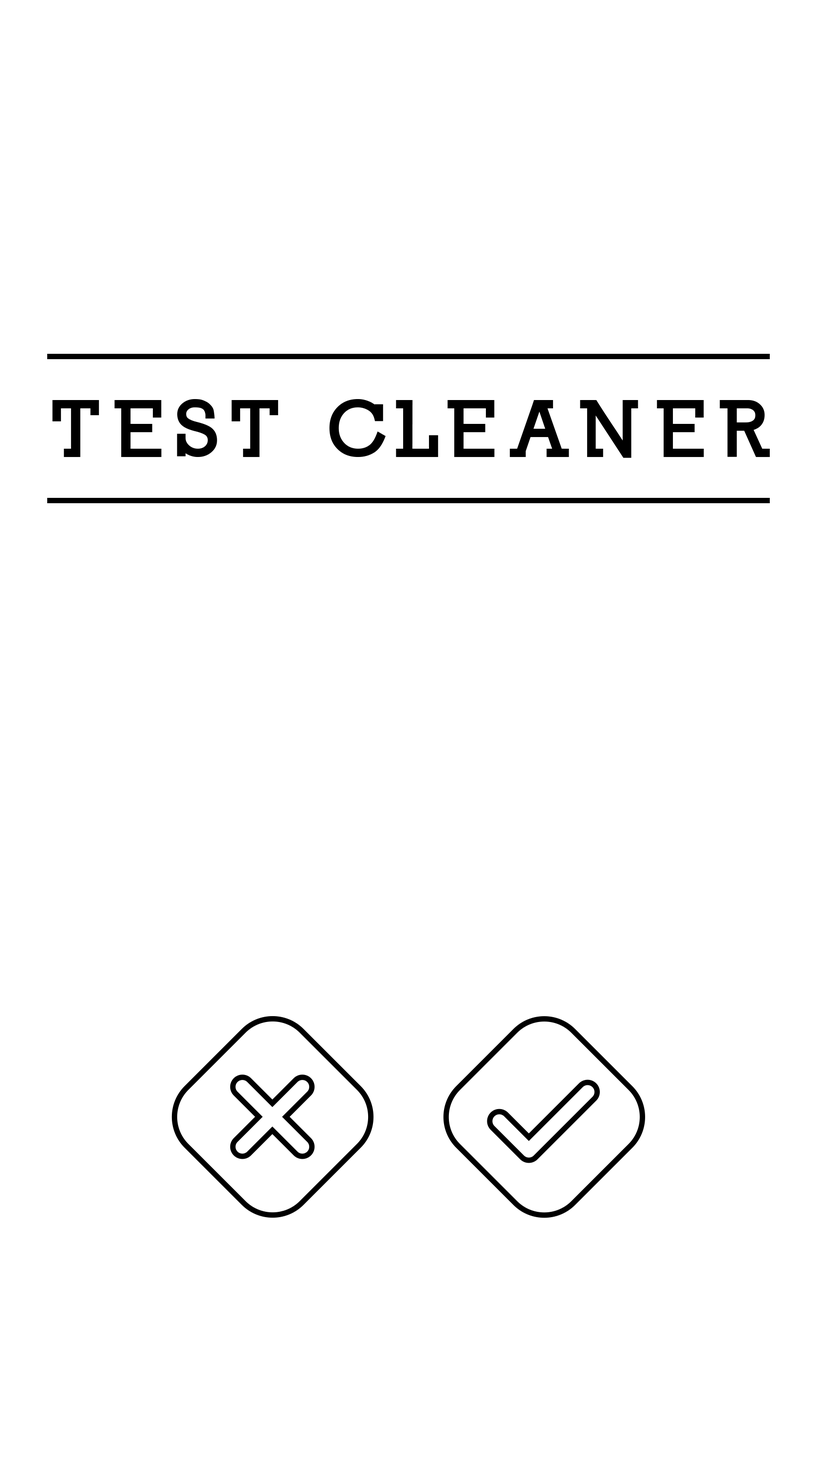
<style>
.page{position:relative;width:817px;height:1460px;background:#ffffff}
.page>*{position:absolute;margin:0}
.t1{font:76.9px "Nilland-Black";letter-spacing:0.16em;color:#000000}
</style>
<div class="page">
<p class="t1" style="left:52px;top:399px;width:717px;height:59px">TEST CLEANER</p>
</div>
